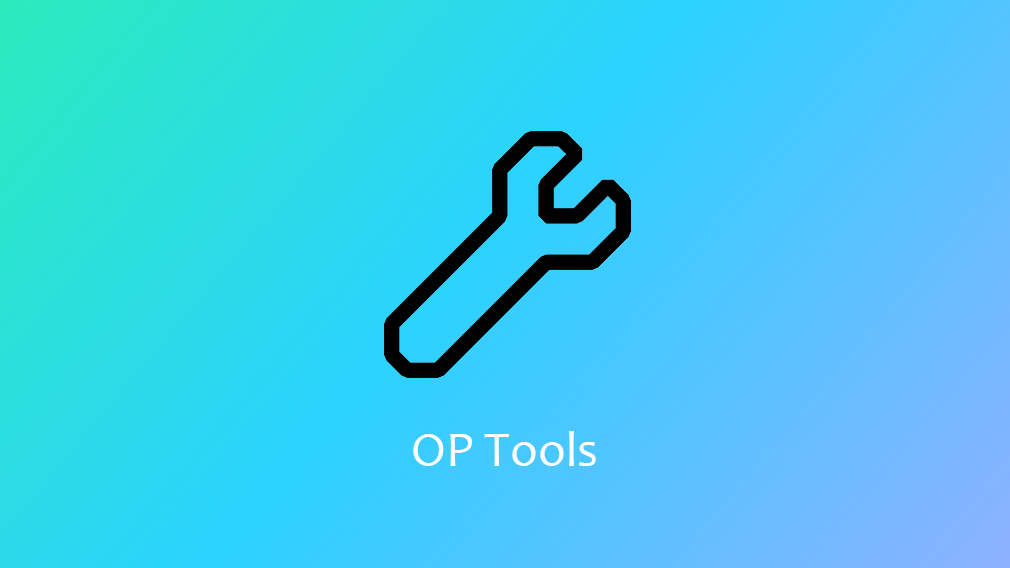
<style>
.page{position:relative;width:1010px;height:568px}
.page>*{position:absolute;margin:0}
.t1{font:50px "Candara";color:#ffffff}
</style>
<div class="page">
<p class="t1" style="left:413px;top:431px;width:183px;height:35px">OP Tools</p>
</div>
